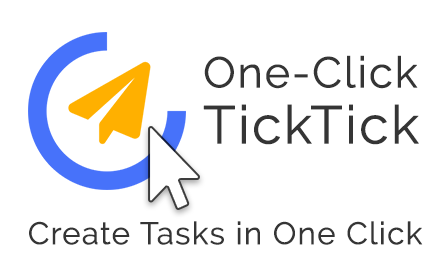
<style>
.page{position:relative;width:440px;height:280px;background:#ffffff}
.page>*{position:absolute;margin:0}
.t1{font:43px/56px "Raleway-Regular";letter-spacing:0.021em;color:#353535;font-weight:bold}
.t2{font:53px/56px "Raleway-Regular";letter-spacing:0.021em;color:#353535;font-weight:bold}
.t3{font:31px "Raleway-Regular";letter-spacing:0.021em;color:#353535;font-weight:bold}
</style>
<div class="page">
<p class="t1" style="left:203px;top:55px;width:216px;height:90px">One-Click<br><span class="t2">TickTick</span></p>
<p class="t3" style="left:29px;top:221px;width:394px;height:24px">Create Tasks in One Click</p>
</div>
